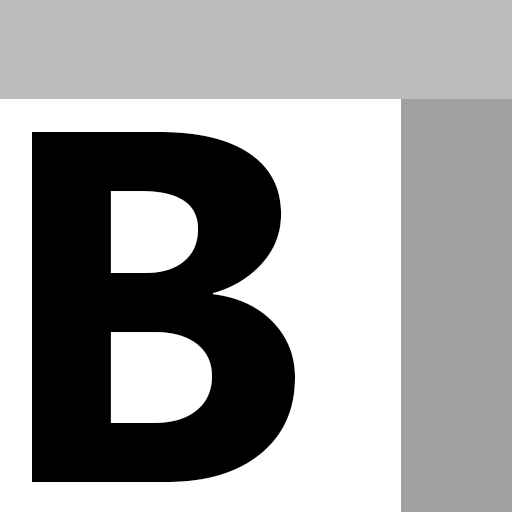
<style>
.page{position:relative;width:512px;height:512px;background:#ffffff}
.page>*{position:absolute;margin:0}
.t1{font:500px "MicrosoftNewTaiLue-Bold";color:#000000}
</style>
<div class="page">
<p class="t1" style="left:32px;top:132px;width:263px;height:350px">B</p>
</div>
